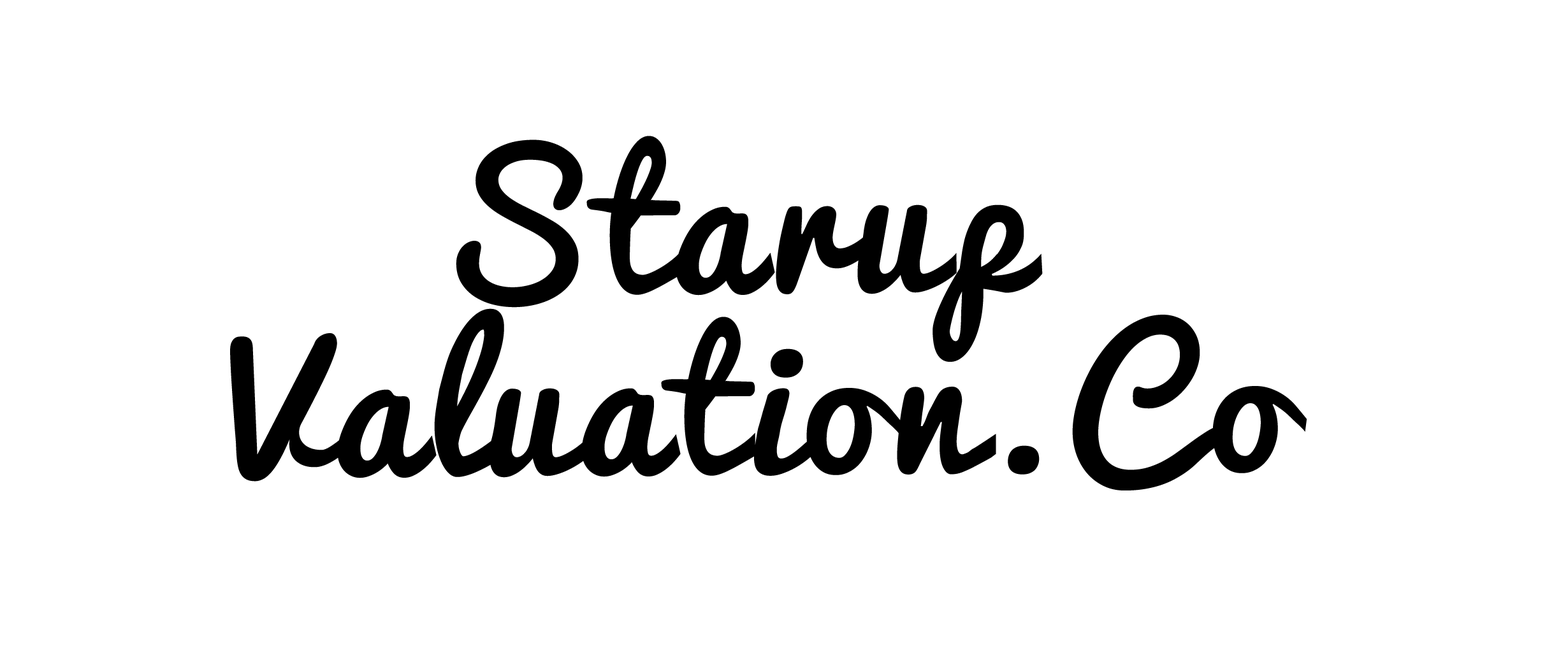
<style>
.page{position:relative;width:1568px;height:665px;background:#ffffff}
.page>*{position:absolute;margin:0}
.t1{font:181.3px/181.5px "Pacifico";letter-spacing:0.04em;color:#000000}
</style>
<div class="page">
<p class="t1" style="left:230px;top:136px;width:1077px;height:355px;text-align:center">Starup <br>Valuation.Co</p>
</div>
